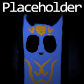
<style>
.page{position:relative;width:84px;height:84px;background:#000000}
.page>*{position:absolute;margin:0}
.t1{font:14.2px "Consolas";letter-spacing:-0.1em;color:#ffffff;scale:1.13 1}
</style>
<div class="page">
<p class="t1" style="left:3px;top:2px;width:79px;height:10px">Placeholder</p>
</div>
